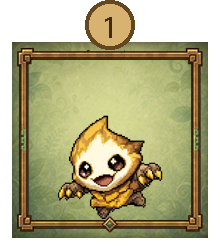
<style>
.page{position:relative;width:220px;height:250px;background:#ffffff}
.page>*{position:absolute;margin:0}
.t1{font:28px "AdobeHeitiStd-Regular";color:#3d2b18}
</style>
<div class="page">
<p class="t1" style="left:105px;top:17px;width:7px;height:21px">1</p>
</div>
